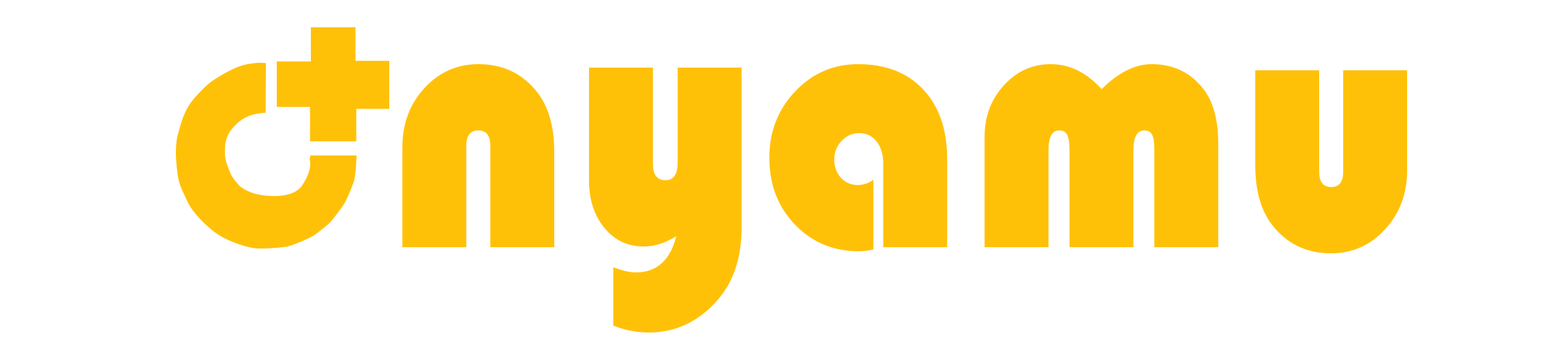
<style>
.page{position:relative;width:1568px;height:340px;background:#ffffff}
.page>*{position:absolute;margin:0}
.t1{font:368.1px "Bauhaus93";color:#ffc107;scale:0.95 1}
</style>
<div class="page">
<p class="t1" style="left:402px;top:64px;width:1005px;height:268px">nyamu</p>
</div>
